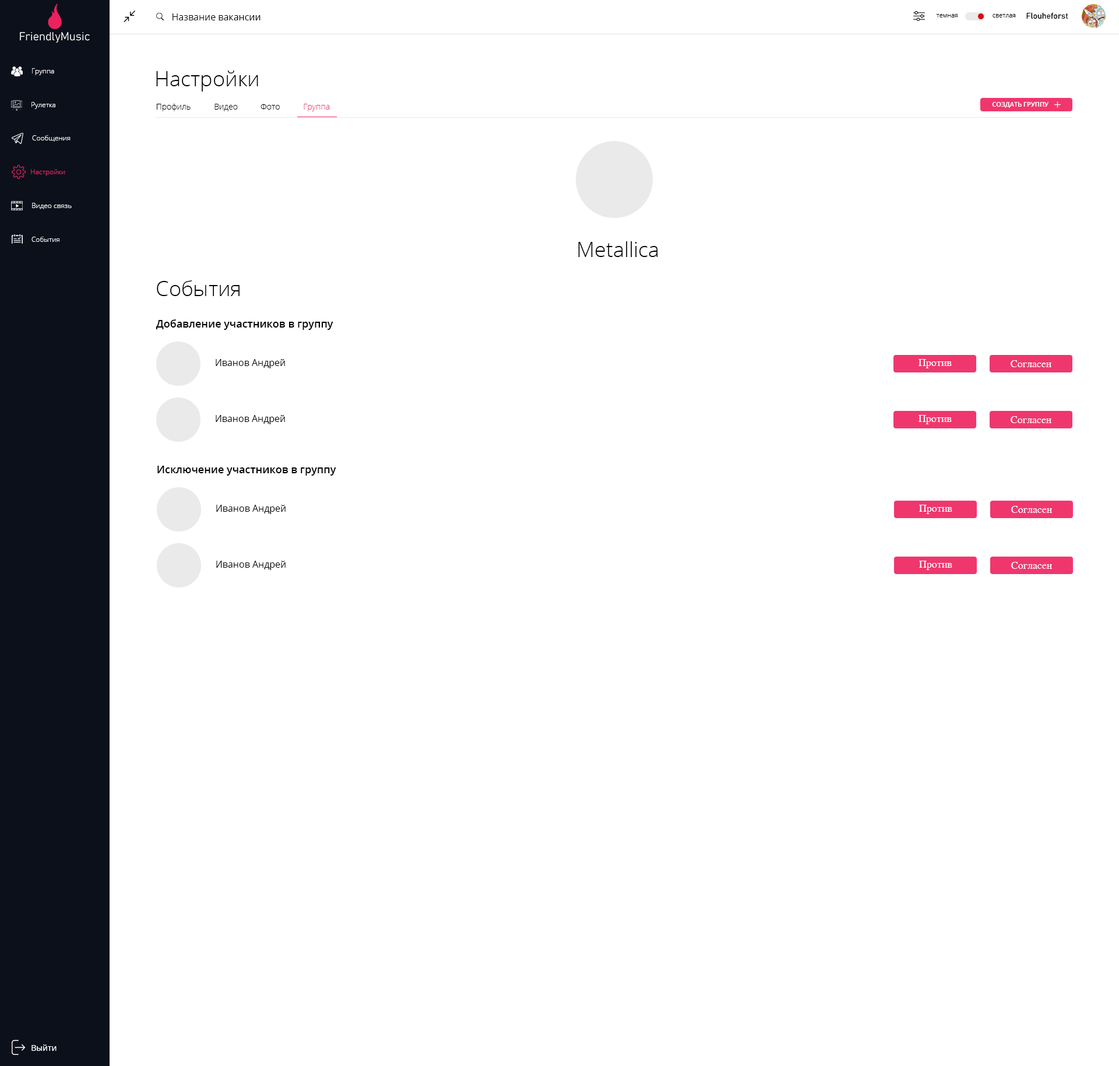
<style>
.page{position:relative;width:1119px;height:1066px;background:#ffffff}
.page>*{position:absolute;margin:0}
.t1{font:9.3px "OpenSans";color:#000000}
.t2{font:6.4px "OpenSans-Light";color:#000000}
.t3{font:8.2px "Bahnschrift";color:#000000}
.t4{font:7px "OpenSans-Light";color:#ffffff}
.t5{font:21px "OpenSans-Light";color:#000000}
.t6{font:6.4px "OpenSans-Semibold";color:#ffffff;text-transform:uppercase}
.t7{font:8.2px "OpenSans-Light";color:#000000}
.t8{font:8.2px "OpenSans-Light";color:#ef376e}
.t9{font:7px "OpenSans-Light";color:#ed215e}
.t10{font:10.5px "OpenSans-Semibold";color:#000000}
.t11{font:10.5px "Nakula";color:#ffffff}
.t12{font:8.2px "OpenSans";color:#ffffff}
</style>
<div class="page">
<p class="t1" style="left:172px;top:13px;width:88px;height:7px">Название вакансии</p>
<p class="t2" style="left:936px;top:14px;width:21px;height:3px">темная</p>
<p class="t2" style="left:992px;top:14px;width:23px;height:3px">светлая</p>
<p class="t3" style="left:1026px;top:12px;width:42px;height:7px">Flouheforst</p>
<p class="t4" style="left:32px;top:68px;width:22px;height:7px">Группа</p>
<p class="t5" style="left:156px;top:71px;width:102px;height:20px">Настройки</p>
<p class="t4" style="left:31px;top:102px;width:24px;height:7px">Рулетка</p>
<p class="t6" style="left:992px;top:102px;width:56px;height:6px">Создать группу</p>
<p class="t7" style="left:157px;top:103px;width:34px;height:8px">Профиль</p>
<p class="t7" style="left:214px;top:104px;width:24px;height:7px">Видео</p>
<p class="t7" style="left:260px;top:104px;width:20px;height:6px">Фото</p>
<p class="t8" style="left:304px;top:104px;width:26px;height:7px">Группа</p>
<p class="t4" style="left:32px;top:135px;width:39px;height:7px">Сообщения</p>
<p class="t9" style="left:31px;top:169px;width:34px;height:7px">Настройки</p>
<p class="t4" style="left:32px;top:203px;width:40px;height:6px">Видео связь</p>
<p class="t4" style="left:31px;top:237px;width:28px;height:5px">События</p>
<p class="t5" style="left:578px;top:241px;width:80px;height:16px">Metallica</p>
<p class="t5" style="left:157px;top:280px;width:82px;height:16px">События</p>
<p class="t10" style="left:156px;top:319px;width:177px;height:11px">Добавление участников в группу</p>
<p class="t1" style="left:216px;top:359px;width:69px;height:9px">Иванов Андрей</p>
<p class="t11" style="left:918px;top:359px;width:34px;height:9px">Против</p>
<p class="t11" style="left:1010px;top:360px;width:41px;height:7px">Согласен</p>
<p class="t1" style="left:216px;top:415px;width:69px;height:9px">Иванов Андрей</p>
<p class="t11" style="left:918px;top:415px;width:34px;height:9px">Против</p>
<p class="t11" style="left:1010px;top:416px;width:41px;height:7px">Согласен</p>
<p class="t10" style="left:157px;top:466px;width:179px;height:9px">Исключение участников в группу</p>
<p class="t1" style="left:216px;top:505px;width:70px;height:9px">Иванов Андрей</p>
<p class="t11" style="left:919px;top:505px;width:33px;height:9px">Против</p>
<p class="t11" style="left:1011px;top:506px;width:41px;height:7px">Согласен</p>
<p class="t1" style="left:216px;top:561px;width:70px;height:9px">Иванов Андрей</p>
<p class="t11" style="left:919px;top:561px;width:33px;height:9px">Против</p>
<p class="t11" style="left:1011px;top:562px;width:41px;height:7px">Согласен</p>
<p class="t12" style="left:31px;top:1044px;width:26px;height:7px">Выйти</p>
</div>
